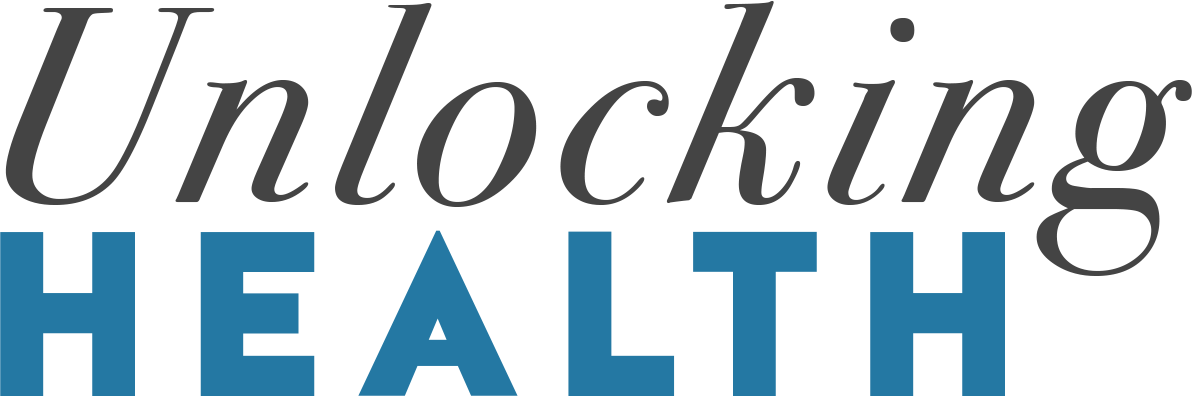
<style>
.page{position:relative;width:1192px;height:396px;background:#ffffff}
.page>*{position:absolute;margin:0}
.t1{font:281px/194px "BodoniSvtyTwoITCTT-BookIta";letter-spacing:0.05em;color:#444444}
.t2{font:281px/194px "HalisGR-SBlack";letter-spacing:0.07em;color:#2478a3}
</style>
<div class="page">
<p class="t1" style="left:0px;top:1px;width:1192px;height:396px;text-align:justify">Unlocking <br> <span class="t2">health</span></p>
</div>
